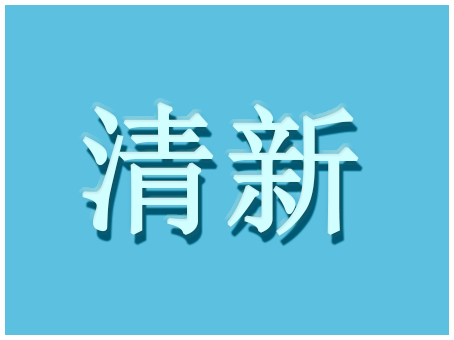
<style>
.page{position:relative;width:454px;height:340px;background:#5cc0e0}
.page>*{position:absolute;margin:0}
.t1{font:140px "SimSun";color:#d1ffff;font-weight:bold}
</style>
<div class="page">
<p class="t1" style="left:82px;top:102px;width:277px;height:134px">清新</p>
</div>
